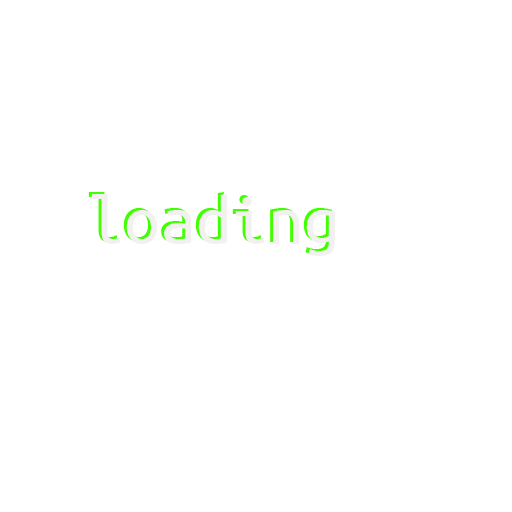
<style>
.page{position:relative;width:512px;height:512px;background:#ffffff}
.page>*{position:absolute;margin:0}
.t1{font:72px "UbuntuMono-Regular"}
.t2{font:72px "UbuntuMono-Regular";color:#f2f1ef}
</style>
<div class="page">
<p class="t1" style="left:88px;top:192px;width:244px;height:62px">loading</p>
<p class="t2" style="left:91px;top:194px;width:244px;height:62px">loading</p>
</div>
